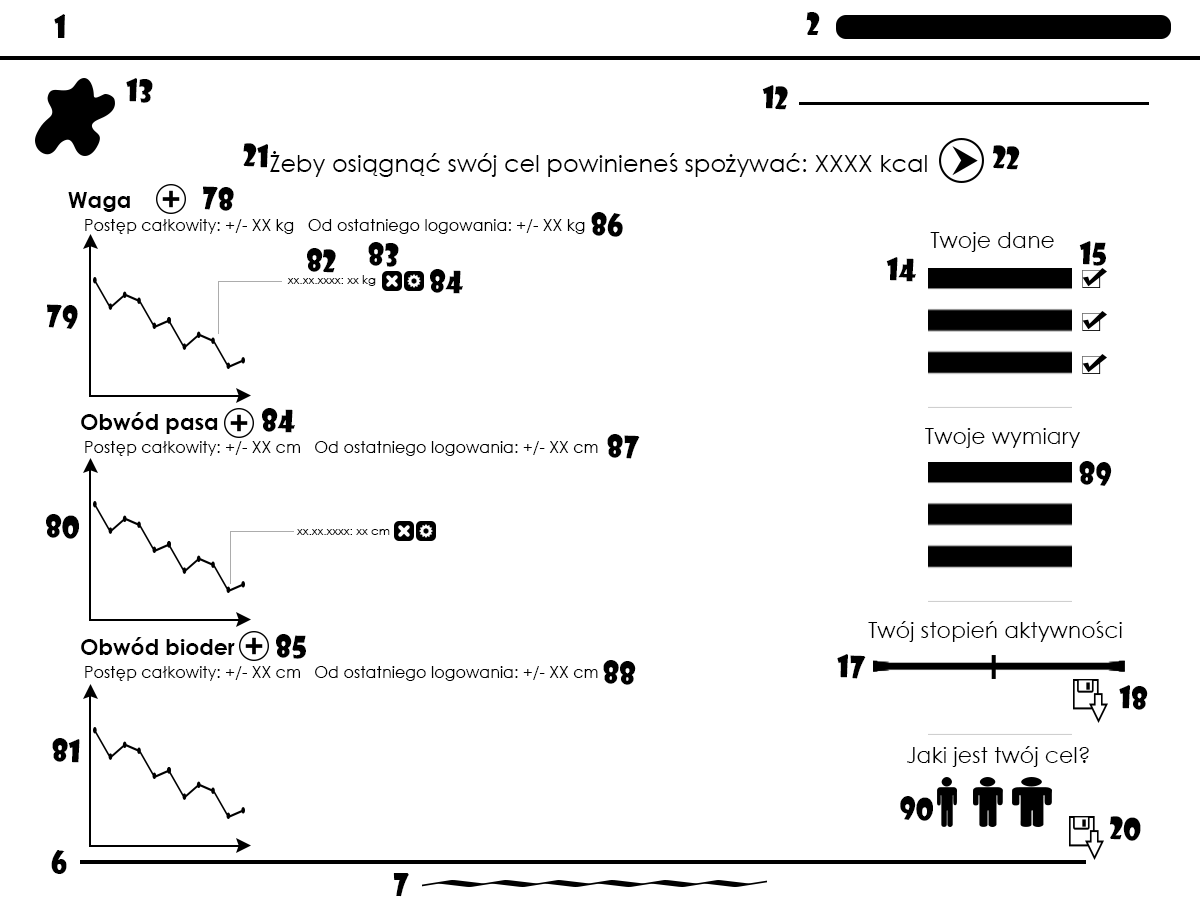
<style>
.page{position:relative;width:1200px;height:901px;background:#ffffff}
.page>*{position:absolute;margin:0}
.t1{font:30px "ShowcardGothic-Reg";color:#000000}
.t2{font:24px "CenturyGothic";color:#000000}
.t3{font:22px "CenturyGothic-Bold";color:#000000}
.t4{font:16px "CenturyGothic";color:#000000}
.t5{font:22px "CenturyGothic";color:#000000}
.t6{font:12px "CenturyGothic";color:#000000}
</style>
<div class="page">
<p class="t1" style="left:54px;top:14px;width:11px;height:24px">1</p>
<p class="t1" style="left:806px;top:12px;width:14px;height:23px">2</p>
<p class="t1" style="left:126px;top:78px;width:27px;height:25px;rotate:2deg">13</p>
<p class="t1" style="left:762px;top:85px;width:26px;height:25px;rotate:2deg">12</p>
<p class="t1" style="left:243px;top:143px;width:25px;height:25px;rotate:2deg">21</p>
<p class="t1" style="left:993px;top:145px;width:27px;height:25px;rotate:2deg">22</p>
<p class="t2" style="left:270px;top:151px;width:657px;height:26px">Żeby osiągnąć swój cel powinieneś spożywać: XXXX kcal</p>
<p class="t3" style="left:68px;top:192px;width:62px;height:20px">Waga</p>
<p class="t1" style="left:203px;top:186px;width:31px;height:25px;rotate:2deg">78</p>
<p class="t4" style="left:85px;top:219px;width:500px;height:15px">Postęp całkowity: +/- XX kg   Od ostatniego logowania: +/- XX kg</p>
<p class="t1" style="left:591px;top:212px;width:32px;height:25px;rotate:2deg">86</p>
<p class="t5" style="left:930px;top:232px;width:124px;height:20px">Twoje dane</p>
<p class="t1" style="left:368px;top:242px;width:31px;height:25px;rotate:2deg">83</p>
<p class="t1" style="left:1079px;top:241px;width:27px;height:25px;rotate:2deg">15</p>
<p class="t1" style="left:307px;top:248px;width:29px;height:25px;rotate:2deg">82</p>
<p class="t1" style="left:886px;top:257px;width:30px;height:25px;rotate:2deg">14</p>
<p class="t1" style="left:430px;top:269px;width:33px;height:25px;rotate:2deg">84</p>
<p class="t6" style="left:287px;top:275px;width:89px;height:11px">xx.xx.xxxx: xx kg</p>
<p class="t1" style="left:47px;top:304px;width:31px;height:25px;rotate:2deg">79</p>
<p class="t3" style="left:81px;top:412px;width:137px;height:22px">Obwód pasa</p>
<p class="t1" style="left:262px;top:408px;width:33px;height:25px;rotate:2deg">84</p>
<p class="t1" style="left:607px;top:434px;width:33px;height:25px;rotate:2deg">87</p>
<p class="t5" style="left:925px;top:428px;width:155px;height:20px">Twoje wymiary</p>
<p class="t4" style="left:85px;top:441px;width:513px;height:15px">Postęp całkowity: +/- XX cm   Od ostatniego logowania: +/- XX cm</p>
<p class="t1" style="left:1079px;top:461px;width:33px;height:25px;rotate:2deg">89</p>
<p class="t1" style="left:46px;top:514px;width:33px;height:25px;rotate:2deg">80</p>
<p class="t6" style="left:296px;top:529px;width:94px;height:6px">xx.xx.xxxx: xx cm</p>
<p class="t5" style="left:868px;top:621px;width:254px;height:21px">Twój stopień aktywności</p>
<p class="t3" style="left:81px;top:637px;width:154px;height:18px">Obwód bioder</p>
<p class="t1" style="left:276px;top:634px;width:30px;height:25px;rotate:2deg">85</p>
<p class="t1" style="left:837px;top:654px;width:29px;height:25px;rotate:2deg">17</p>
<p class="t1" style="left:603px;top:660px;width:33px;height:25px;rotate:2deg">88</p>
<p class="t4" style="left:85px;top:666px;width:513px;height:15px">Postęp całkowity: +/- XX cm   Od ostatniego logowania: +/- XX cm</p>
<p class="t1" style="left:1119px;top:685px;width:29px;height:25px;rotate:2deg">18</p>
<p class="t1" style="left:52px;top:738px;width:28px;height:25px;rotate:2deg">81</p>
<p class="t5" style="left:907px;top:746px;width:182px;height:21px">Jaki jest twój cel?</p>
<p class="t1" style="left:900px;top:796px;width:33px;height:25px;rotate:2deg">90</p>
<p class="t1" style="left:1110px;top:816px;width:31px;height:25px;rotate:2deg">20</p>
<p class="t1" style="left:51px;top:850px;width:16px;height:24px">6</p>
<p class="t1" style="left:393px;top:873px;width:16px;height:24px">7</p>
</div>
